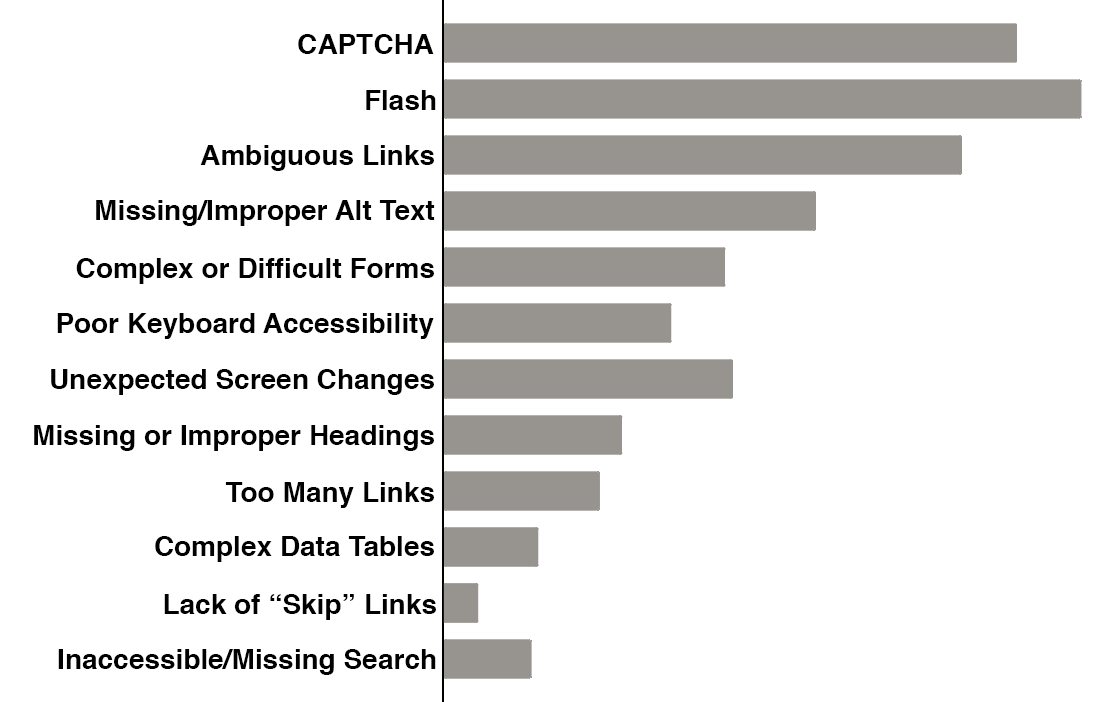
<style>
.page{position:relative;width:1104px;height:702px;background:#ffffff}
.page>*{position:absolute;margin:0}
.t1{font:28px "Helvetica-Bold";color:#000000}
</style>
<div class="page">
<p class="t1" style="left:298px;top:34px;width:136px;height:20px">CAPTCHA</p>
<p class="t1" style="left:366px;top:90px;width:70px;height:20px">Flash</p>
<p class="t1" style="left:200px;top:145px;width:234px;height:26px">Ambiguous Links</p>
<p class="t1" style="left:96px;top:200px;width:339px;height:26px">Missing/Improper Alt Text</p>
<p class="t1" style="left:76px;top:258px;width:358px;height:26px">Complex or Difficult Forms</p>
<p class="t1" style="left:57px;top:313px;width:377px;height:26px">Poor Keyboard Accessibility</p>
<p class="t1" style="left:51px;top:369px;width:383px;height:26px">Unexpected Screen Changes</p>
<p class="t1" style="left:34px;top:425px;width:400px;height:26px">Missing or Improper Headings</p>
<p class="t1" style="left:225px;top:482px;width:209px;height:26px">Too Many Links</p>
<p class="t1" style="left:155px;top:536px;width:279px;height:26px">Complex Data Tables</p>
<p class="t1" style="left:164px;top:594px;width:272px;height:26px">Lack of “Skip” Links</p>
<p class="t1" style="left:58px;top:649px;width:378px;height:26px">Inaccessible/Missing Search</p>
</div>
